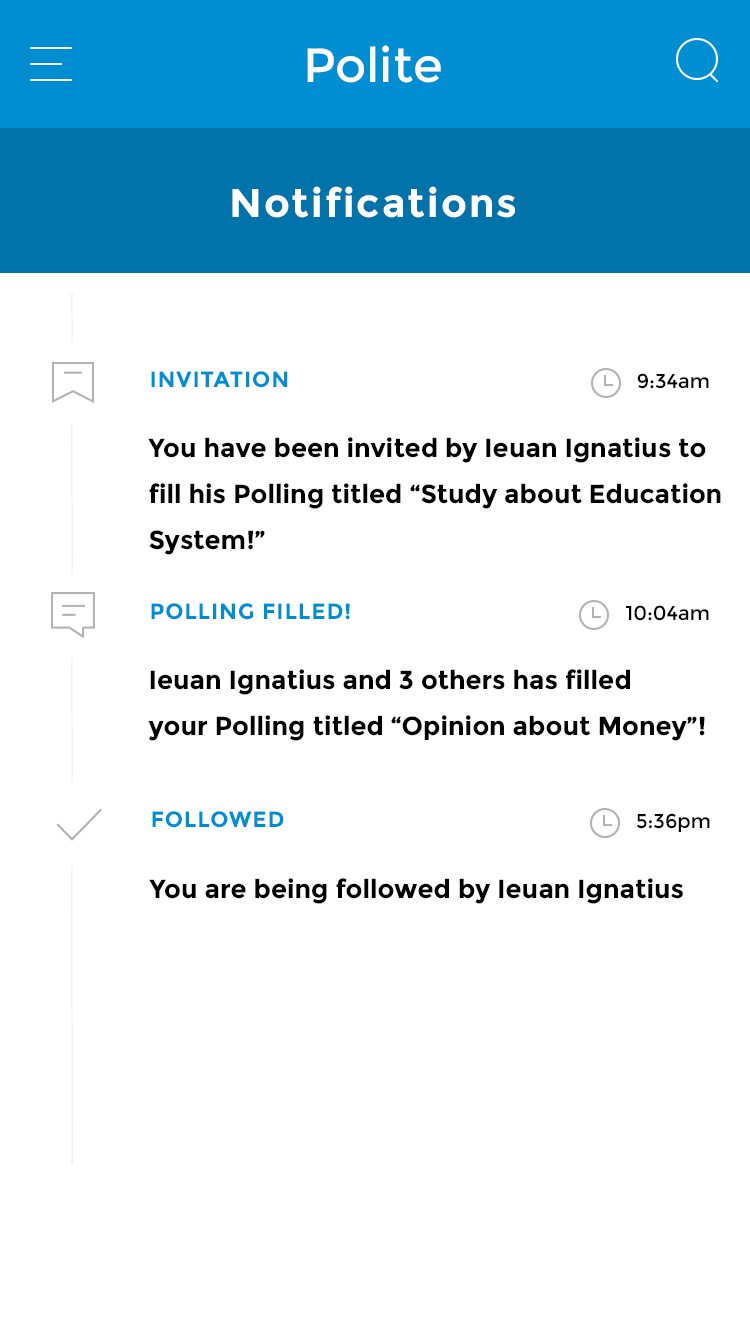
<style>
.page{position:relative;width:750px;height:1334px;background:#ffffff}
.page>*{position:absolute;margin:0}
.t1{font:48px "Montserrat-Regular";color:#ffffff}
.t2{font:40px "Montserrat-Bold";letter-spacing:0.05em;color:#ffffff}
.t3{font:22px "Montserrat-Bold";letter-spacing:0.04em;color:#008ed3}
.t4{font:20px "Montserrat-Regular";color:#000000}
.t5{font:26px/46px "Montserrat-Bold";color:#000000}
.t6{font:26px "Montserrat-Bold";color:#000000}
</style>
<div class="page">
<p class="t1" style="left:307px;top:45px;width:134px;height:38px">Polite</p>
<p class="t2" style="left:232px;top:186px;width:283px;height:32px">Notifications</p>
<p class="t3" style="left:151px;top:371px;width:137px;height:17px">INVITATION</p>
<p class="t4" style="left:637px;top:373px;width:72px;height:16px">9:34am</p>
<p class="t5" style="left:148px;top:437px;width:573px;height:118px">You have been invited by Ieuan Ignatius to <br>fill his Polling titled “Study about Education<br>System!”</p>
<p class="t3" style="left:151px;top:603px;width:199px;height:17px">POLLING FILLED!</p>
<p class="t4" style="left:626px;top:605px;width:83px;height:16px">10:04am</p>
<p class="t5" style="left:148px;top:669px;width:557px;height:72px">Ieuan Ignatius and 3 others has filled <br>your Polling titled “Opinion about Money”!</p>
<p class="t3" style="left:152px;top:811px;width:132px;height:17px">FOLLOWED</p>
<p class="t4" style="left:637px;top:813px;width:73px;height:19px">5:36pm</p>
<p class="t6" style="left:149px;top:878px;width:534px;height:26px">You are being followed by Ieuan Ignatius</p>
</div>
